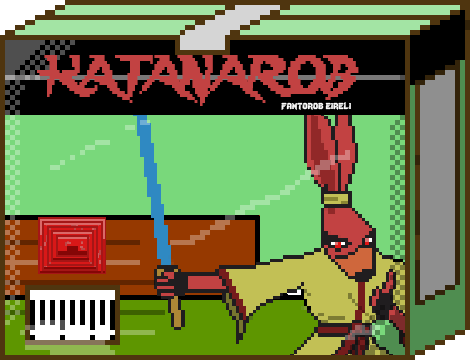
<style>
.page{position:relative;width:470px;height:360px;background:#79d87b}
.page>*{position:absolute;margin:0}
.t1{font:48px "Lady-Radical";color:#c24242;scale:0.84 1}
.t2{font:12px "Lady-Radical";color:#fbfbfb}
</style>
<div class="page">
<p class="t1" style="left:37px;top:55px;width:322px;height:51px">KATANAROB</p>
<p class="t2" style="left:281px;top:102px;width:70px;height:8px">fantorob eireli</p>
</div>
